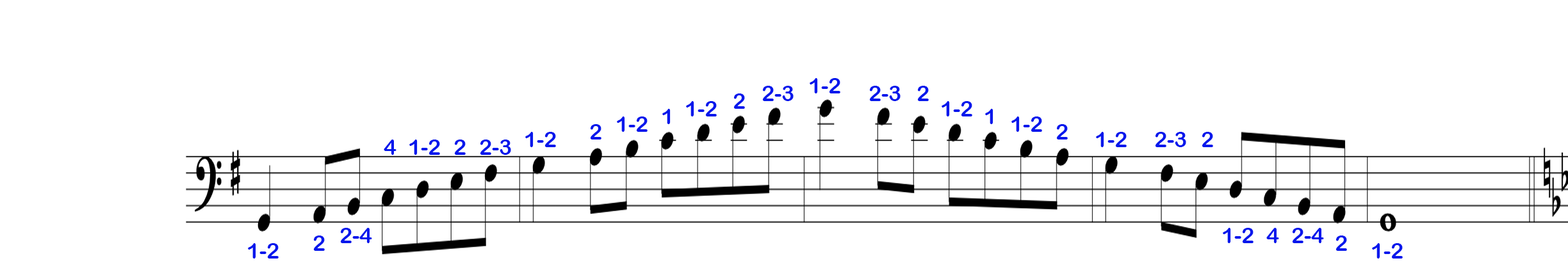
<style>
.page{position:relative;width:1568px;height:279px;background:#ffffff}
.page>*{position:absolute;margin:0}
.t1{font:21.8px "ArialRoundedMTBold";color:#0417ec}
</style>
<div class="page">
<p class="t1" style="left:762px;top:86px;width:32px;height:15px">2-3</p>
<p class="t1" style="left:810px;top:78px;width:30px;height:16px">1-2</p>
<p class="t1" style="left:869px;top:86px;width:32px;height:15px">2-3</p>
<p class="t1" style="left:917px;top:86px;width:12px;height:15px">2</p>
<p class="t1" style="left:686px;top:101px;width:31px;height:16px">1-2</p>
<p class="t1" style="left:733px;top:94px;width:12px;height:15px">2</p>
<p class="t1" style="left:942px;top:101px;width:30px;height:16px">1-2</p>
<p class="t1" style="left:662px;top:109px;width:9px;height:15px">1</p>
<p class="t1" style="left:985px;top:109px;width:8px;height:15px">1</p>
<p class="t1" style="left:590px;top:124px;width:11px;height:16px">2</p>
<p class="t1" style="left:617px;top:117px;width:31px;height:15px">1-2</p>
<p class="t1" style="left:1011px;top:117px;width:31px;height:15px">1-2</p>
<p class="t1" style="left:1056px;top:124px;width:12px;height:16px">2</p>
<p class="t1" style="left:525px;top:132px;width:31px;height:15px">1-2</p>
<p class="t1" style="left:1096px;top:132px;width:31px;height:15px">1-2</p>
<p class="t1" style="left:1155px;top:132px;width:31px;height:15px">2-3</p>
<p class="t1" style="left:1202px;top:132px;width:11px;height:15px">2</p>
<p class="t1" style="left:384px;top:140px;width:12px;height:15px">4</p>
<p class="t1" style="left:409px;top:140px;width:31px;height:15px">1-2</p>
<p class="t1" style="left:454px;top:140px;width:12px;height:15px">2</p>
<p class="t1" style="left:480px;top:140px;width:31px;height:15px">2-3</p>
<p class="t1" style="left:340px;top:228px;width:32px;height:15px">2-4</p>
<p class="t1" style="left:1223px;top:228px;width:31px;height:15px">1-2</p>
<p class="t1" style="left:1266px;top:228px;width:13px;height:15px">4</p>
<p class="t1" style="left:1292px;top:228px;width:32px;height:15px">2-4</p>
<p class="t1" style="left:248px;top:243px;width:31px;height:16px">1-2</p>
<p class="t1" style="left:313px;top:236px;width:12px;height:15px">2</p>
<p class="t1" style="left:1335px;top:236px;width:12px;height:15px">2</p>
<p class="t1" style="left:1372px;top:243px;width:31px;height:16px">1-2</p>
</div>
